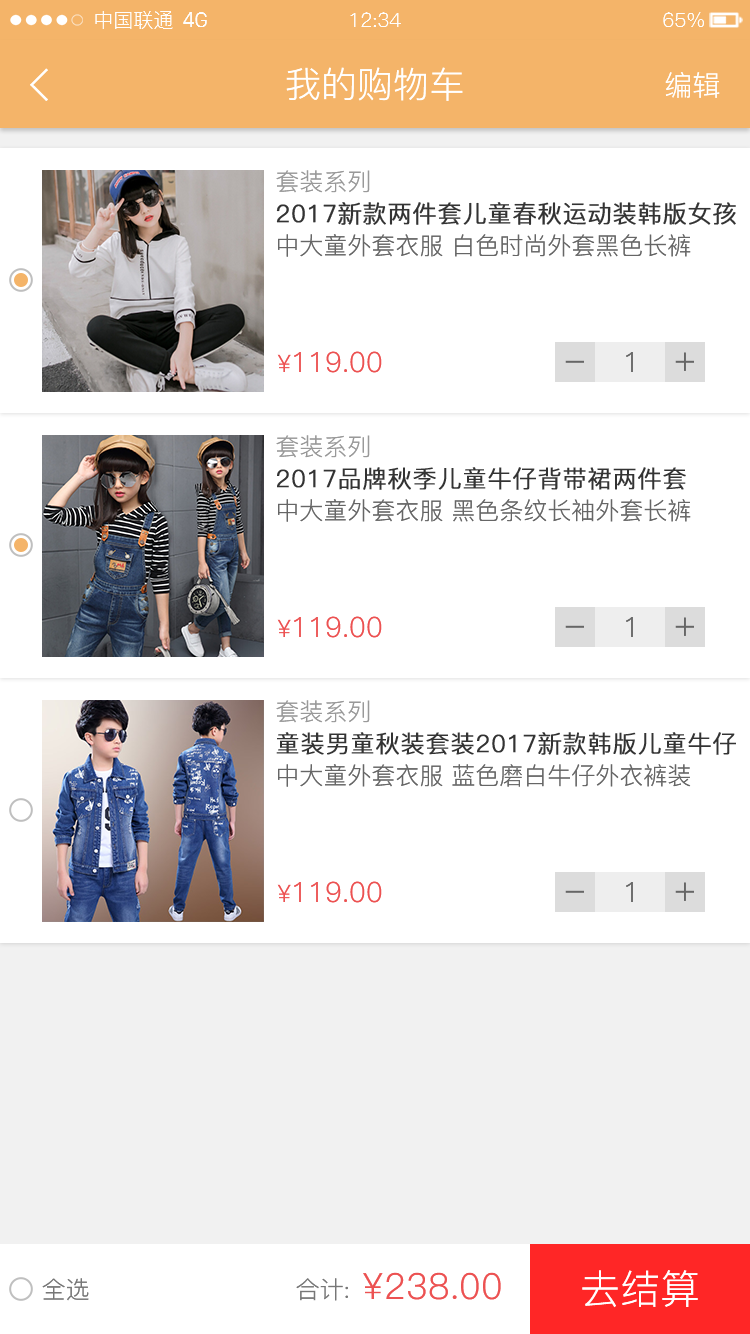
<style>
.page{position:relative;width:750px;height:1334px;background:#ffffff}
.page>*{position:absolute;margin:0}
.t1{font:20px "PingFang-SC-Regular";color:#fefefe}
.t2{font:20px "SanFranciscoDisplay";color:#fefefe}
.t3{font:36px "PingFang-SC-Regular";color:#ffffff}
.t4{font:28px "PingFang-SC-Regular";color:#ffffff}
.t5{font:24px "PingFang-SC-Regular";color:#999999}
.t6{font:24px "PingFang-SC-Regular";color:#333333;font-weight:bold}
.t7{font:24px "PingFang-SC-Regular";color:#666666}
.t8{font:28px "PingFang-SC-Regular";color:#ec5252}
.t9{font:24px "PingFang-SC-Regular";color:#ec5252}
.t10{font:28px "PingFang-SC-Regular";color:#666666}
.t11{font:36px "PingFang-SC-Regular";color:#666666}
.t12{font:24px "PingFang-SC-Regular";color:#777777}
.t13{font:36px "PingFang-SC-Regular";color:#ec5252}
.t14{font:40px "PingFang-SC-Regular";color:#ffffff}
</style>
<div class="page">
<p class="t1" style="left:95px;top:11px;width:78px;height:18px">中国联通</p>
<p class="t2" style="left:183px;top:12px;width:24px;height:15px">4G</p>
<p class="t1" style="left:350px;top:12px;width:51px;height:15px">12:34</p>
<p class="t1" style="left:663px;top:12px;width:41px;height:15px">65%</p>
<p class="t3" style="left:286px;top:67px;width:177px;height:34px">我的购物车</p>
<p class="t4" style="left:665px;top:72px;width:55px;height:26px">编辑</p>
<p class="t5" style="left:276px;top:170px;width:94px;height:23px">套装系列</p>
<p class="t6" style="left:276px;top:202px;width:460px;height:23px">2017新款两件套儿童春秋运动装韩版女孩</p>
<p class="t7" style="left:278px;top:234px;width:413px;height:23px">中大童外套衣服 白色时尚外套黑色长裤</p>
<p class="t8" style="left:277px;top:351px;width:105px;height:22px"><span class="t9">¥</span>119.00</p>
<p class="t10" style="left:626px;top:352px;width:7px;height:20px">1</p>
<p class="t11" style="left:675px;top:352px;width:19px;height:19px">+</p>
<p class="t11" style="left:565px;top:360px;width:19px;height:3px">-</p>
<p class="t5" style="left:276px;top:435px;width:94px;height:23px">套装系列</p>
<p class="t6" style="left:277px;top:467px;width:409px;height:23px">2017品牌秋季儿童牛仔背带裙两件套</p>
<p class="t7" style="left:278px;top:499px;width:413px;height:23px">中大童外套衣服 黑色条纹长袖外套长裤</p>
<p class="t8" style="left:277px;top:616px;width:105px;height:22px"><span class="t9">¥</span>119.00</p>
<p class="t10" style="left:626px;top:617px;width:7px;height:20px">1</p>
<p class="t11" style="left:675px;top:617px;width:19px;height:19px">+</p>
<p class="t11" style="left:565px;top:625px;width:19px;height:3px">-</p>
<p class="t5" style="left:276px;top:700px;width:94px;height:23px">套装系列</p>
<p class="t6" style="left:276px;top:732px;width:460px;height:23px">童装男童秋装套装2017新款韩版儿童牛仔</p>
<p class="t7" style="left:278px;top:764px;width:413px;height:23px">中大童外套衣服 蓝色磨白牛仔外衣裤装</p>
<p class="t8" style="left:277px;top:881px;width:105px;height:22px"><span class="t9">¥</span>119.00</p>
<p class="t11" style="left:565px;top:890px;width:19px;height:3px">-</p>
<p class="t10" style="left:626px;top:882px;width:7px;height:20px">1</p>
<p class="t11" style="left:675px;top:882px;width:19px;height:19px">+</p>
<p class="t12" style="left:42px;top:1278px;width:47px;height:23px">全选</p>
<p class="t12" style="left:296px;top:1278px;width:52px;height:23px">合计:</p>
<p class="t13" style="left:363px;top:1272px;width:138px;height:28px">¥238.00</p>
<p class="t14" style="left:582px;top:1270px;width:116px;height:38px">去结算</p>
</div>
